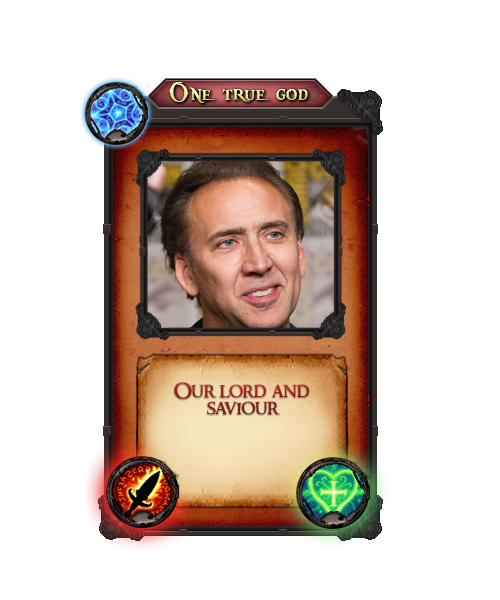
<style>
.page{position:relative;width:500px;height:600px;background:#ffffff}
.page>*{position:absolute;margin:0}
.t1{font:30px "PiecesofEight"}
.t2{font:20px "RingbearerMedium"}
</style>
<div class="page">
<p class="t1" style="left:169px;top:82px;width:139px;height:21px">One true god</p>
<p class="t2" style="left:174px;top:382px;width:135px;height:33px">Our lord and saviour</p>
</div>
